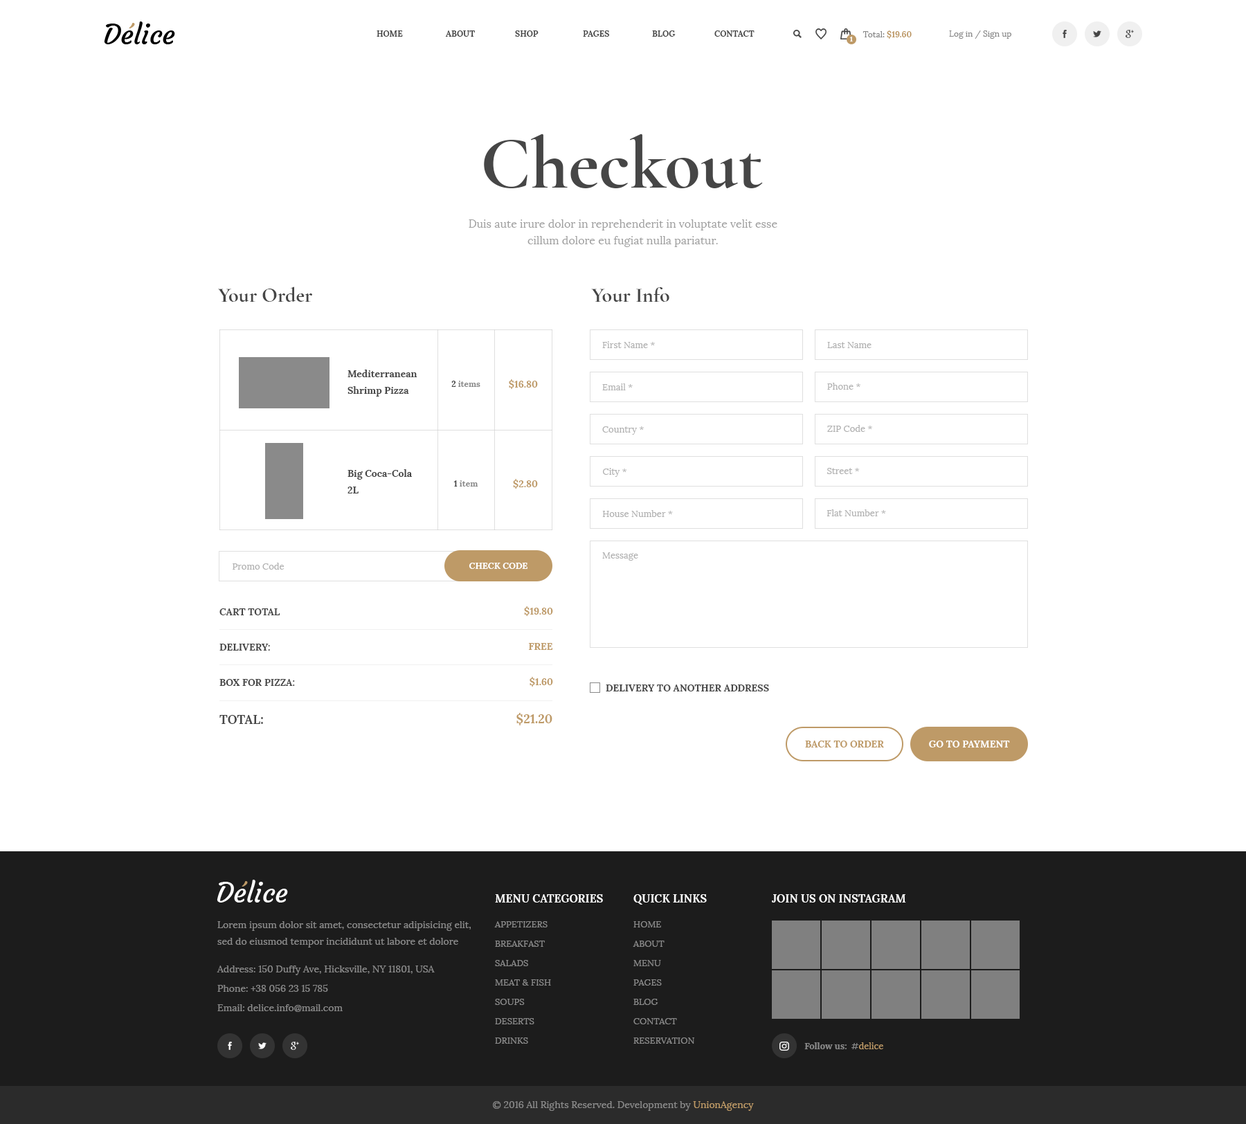
<style>
.page{position:relative;width:1246px;height:1124px;background:#ffffff}
.page>*{position:absolute;margin:0}
.t1{font:27.7px "Courgette-Regular";color:#000000}
.t2{font:8.3px "Lora-Bold";color:#464646;text-transform:uppercase}
.t3{font:6.9px "Lora-Bold";color:#fffffe}
.t4{font:8.3px "Lora-Regular";color:#898989}
.t5{font:8.3px "Lora-Bold";color:#be9a67;text-transform:uppercase}
.t6{font:73.7px "CormorantGaramond-Bold";color:#464646}
.t7{font:11.1px/16.6px "Lora-Regular";color:#a0a0a0}
.t8{font:20.8px "CormorantGaramond-Bold";color:#464646}
.t9{font:9px "Lora-Regular";color:#b1b1b1}
.t10{font:9.7px/16.6px "Lora-Bold";color:#464646}
.t11{font:8.3px "Lora-Bold";color:#898989}
.t12{font:9.7px "Lora-Bold";color:#be9a67;text-transform:uppercase}
.t13{font:8.7px "Lora-Bold";color:#ffffff;text-transform:uppercase}
.t14{font:9.7px "Lora-Bold";color:#464646;text-transform:uppercase}
.t15{font:12.5px "Lora-Bold";color:#be9a67;text-transform:uppercase}
.t16{font:12.5px "Lora-Bold";color:#464646;text-transform:uppercase}
.t17{font:9.7px "Lora-Bold";color:#ffffff;text-transform:uppercase}
.t18{font:27.7px "Courgette-Regular";color:#ffffff}
.t19{font:11.1px "Lora-Bold";color:#ffffff;text-transform:uppercase}
.t20{font:9.7px/16.6px "Lora-Regular";color:#898989}
.t21{font:9px/19.4px "Lora-Regular";color:#898989;text-transform:uppercase}
.t22{font:9px/19.4px "Lora-Regular";color:#898989}
.t23{font:9.7px/19.4px "Lora-Regular";color:#898989}
.t24{font:9px "Lora-Bold";color:#898989}
.t25{font:9px "Lora-Regular";color:#be9a67}
.t26{font:9px "Lora-Regular";color:#898989}
.t27{font:9.7px "Lora-Regular";color:#898989}
.t28{font:9.7px "Lora-Regular";color:#be9a67}
</style>
<div class="page">
<p class="t1" style="left:104px;top:21px;width:71px;height:23px">Delice</p>
<p class="t2" style="left:377px;top:30px;width:26px;height:7px">Home</p>
<p class="t2" style="left:445px;top:30px;width:30px;height:7px">About</p>
<p class="t2" style="left:515px;top:30px;width:24px;height:7px">Shop</p>
<p class="t2" style="left:583px;top:30px;width:27px;height:7px">Pages</p>
<p class="t2" style="left:652px;top:30px;width:24px;height:7px">Blog</p>
<p class="t2" style="left:714px;top:30px;width:41px;height:7px">Contact</p>
<p class="t3" style="left:849px;top:37px;width:4px;height:5px">1</p>
<p class="t4" style="left:863px;top:30px;width:49px;height:9px">Total:<span class="t5"> $19.60</span></p>
<p class="t4" style="left:949px;top:30px;width:62px;height:9px">Log in / Sign up</p>
<p class="t6" style="left:484px;top:134px;width:279px;height:54px">Checkout</p>
<p class="t7" style="left:469px;top:219px;width:308px;height:28px;text-align:center">Duis aute irure dolor in reprehenderit in voluptate velit esse<br>cillum dolore eu fugiat nulla pariatur.</p>
<p class="t8" style="left:218px;top:287px;width:94px;height:15px">Your Order</p>
<p class="t8" style="left:591px;top:287px;width:78px;height:15px">Your Info</p>
<p class="t9" style="left:602px;top:341px;width:53px;height:7px">First Name *</p>
<p class="t9" style="left:827px;top:342px;width:45px;height:6px">Last Name</p>
<p class="t10" style="left:348px;top:370px;width:69px;height:27px">Mediterranean <br>Shrimp Pizza</p>
<p class="t11" style="left:451px;top:381px;width:29px;height:6px"><span class="t2">2 </span>items</p>
<p class="t12" style="left:509px;top:379px;width:29px;height:10px">$16.80</p>
<p class="t9" style="left:602px;top:384px;width:31px;height:6px">Email *</p>
<p class="t9" style="left:827px;top:383px;width:34px;height:7px">Phone *</p>
<p class="t9" style="left:827px;top:425px;width:45px;height:7px">ZIP Code *</p>
<p class="t9" style="left:602px;top:426px;width:42px;height:9px">Country *</p>
<p class="t10" style="left:348px;top:469px;width:64px;height:25px">Big Coca-Cola<br>2L</p>
<p class="t9" style="left:603px;top:468px;width:24px;height:9px">City *</p>
<p class="t9" style="left:827px;top:468px;width:33px;height:6px">Street *</p>
<p class="t11" style="left:453px;top:480px;width:25px;height:7px"><span class="t2">1 </span>item</p>
<p class="t12" style="left:513px;top:479px;width:25px;height:10px">$2.80</p>
<p class="t9" style="left:827px;top:510px;width:59px;height:6px">Flat Number *</p>
<p class="t9" style="left:602px;top:510px;width:71px;height:7px">House Number *</p>
<p class="t9" style="left:602px;top:552px;width:36px;height:9px">Message</p>
<p class="t9" style="left:233px;top:563px;width:52px;height:7px">Promo Code</p>
<p class="t13" style="left:469px;top:563px;width:59px;height:6px">CHeck code</p>
<p class="t14" style="left:219px;top:609px;width:61px;height:6px">Cart Total</p>
<p class="t12" style="left:524px;top:606px;width:29px;height:10px">$19.80</p>
<p class="t14" style="left:219px;top:644px;width:51px;height:7px">Delivery:</p>
<p class="t12" style="left:529px;top:643px;width:23px;height:7px">free</p>
<p class="t12" style="left:530px;top:677px;width:23px;height:10px">$1.60</p>
<p class="t14" style="left:219px;top:679px;width:76px;height:7px">Box for pizza:</p>
<p class="t14" style="left:606px;top:685px;width:163px;height:7px">Delivery to another address</p>
<p class="t15" style="left:516px;top:713px;width:36px;height:13px">$21.20</p>
<p class="t16" style="left:219px;top:715px;width:44px;height:9px">Total:</p>
<p class="t12" style="left:805px;top:741px;width:79px;height:7px">Back to order</p>
<p class="t17" style="left:929px;top:741px;width:81px;height:7px">Go to payment</p>
<p class="t18" style="left:217px;top:880px;width:71px;height:23px">Delice</p>
<p class="t19" style="left:495px;top:894px;width:108px;height:9px">Menu categories</p>
<p class="t19" style="left:633px;top:894px;width:74px;height:11px">quick links</p>
<p class="t19" style="left:772px;top:894px;width:134px;height:9px">Join Us On Instagram</p>
<p class="t20" style="left:217px;top:921px;width:254px;height:27px">Lorem ipsum dolor sit amet, consectetur adipisicing elit, sed do eiusmod tempor incididunt ut labore et dolore magna.</p>
<p class="t21" style="left:494px;top:921px;width:57px;height:123px">Appetizers<br>Breakfast<br>Salads<br>Meat &amp; Fish<br>Soups<br>Deserts<br>Drinks</p>
<p class="t22" style="left:633px;top:921px;width:61px;height:123px">HOME<br>ABOUT<br>MENU<br>PAGES<br>BLOG<br>CONTACT<br>RESERVATION</p>
<p class="t23" style="left:217px;top:965px;width:218px;height:47px">Address: 150 Duffy Ave, Hicksville, NY 11801, USA<br>Phone: +38 056 23 15 785<br>Email: delice.info@mail.com</p>
<p class="t24" style="left:804px;top:1043px;width:43px;height:7px">Follow us:</p>
<p class="t25" style="left:852px;top:1043px;width:31px;height:7px"><span class="t26">#</span>delice</p>
<p class="t27" style="left:493px;top:1101px;width:261px;height:10px">© 2016 All Rights Reserved. Development by <span class="t28">UnionAgency</span></p>
</div>
